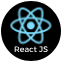
<style>
.page{position:relative;width:62px;height:62px;background:#000000}
.page>*{position:absolute;margin:0}
.t1{font:8px "Alexandria-Regular"}
</style>
<div class="page">
<p class="t1" style="left:14px;top:46px;width:34px;height:7px">React JS</p>
</div>
